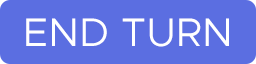
<style>
.page{position:relative;width:256px;height:64px;background:#5b6ee1}
.page>*{position:absolute;margin:0}
.t1{font:40px "Metropolis-Regular";color:#ffffff}
</style>
<div class="page">
<p class="t1" style="left:26px;top:18px;width:203px;height:29px">END TURN</p>
</div>
